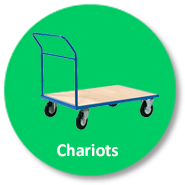
<style>
.page{position:relative;width:185px;height:185px;background:#00cc66}
.page>*{position:absolute;margin:0}
.t1{font:18px "Calibri-Bold";color:#ffffff}
</style>
<div class="page">
<p class="t1" style="left:57px;top:143px;width:61px;height:14px">Chariots</p>
</div>
